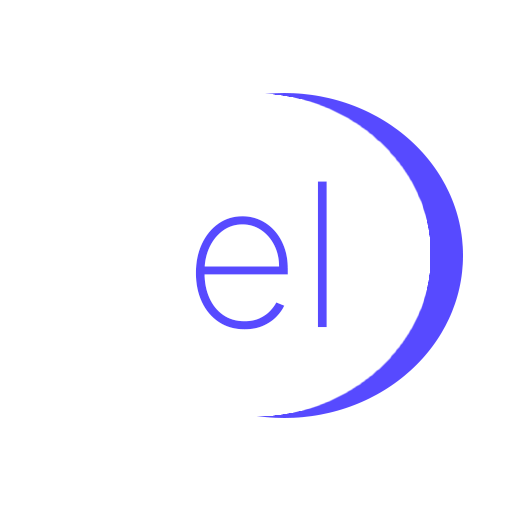
<style>
.page{position:relative;width:512px;height:512px;background:#ffffff}
.page>*{position:absolute;margin:0}
.t1{font:200px "Inter-ExtraLight";color:#574aff}
</style>
<div class="page">
<p class="t1" style="left:195px;top:181px;width:132px;height:149px">el</p>
</div>
